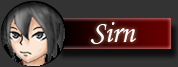
<style>
.page{position:relative;width:178px;height:67px;background:#333333}
.page>*{position:absolute;margin:0}
.t1{font:31.6px "MonotypeCorsiva";color:#ffffff;scale:0.94 1}
</style>
<div class="page">
<p class="t1" style="left:90px;top:22px;width:46px;height:22px">Sirn</p>
</div>
